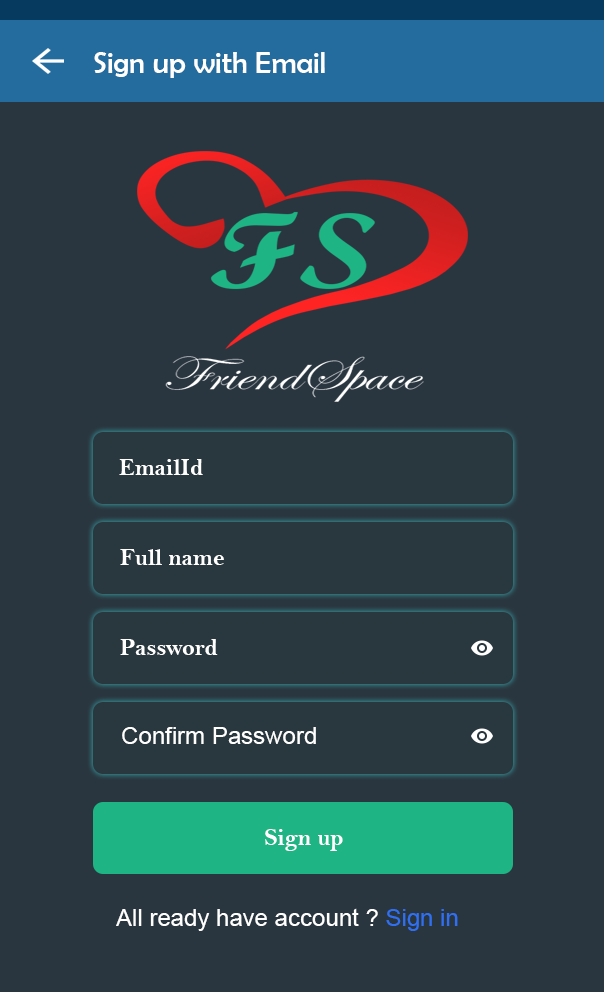
<style>
.page{position:relative;width:604px;height:992px;background:#29363f}
.page>*{position:absolute;margin:0}
.t1{font:30px "BerlinSansFB-Reg";color:#ffffff}
.t2{font:24px "BellMTBold";color:#ffffff}
.t3{font:24px "ArialMT";color:#ffffff}
.t4{font:24px "ArialMT";color:#306fef}
</style>
<div class="page">
<p class="t1" style="left:94px;top:52px;width:231px;height:26px">Sign up with Email</p>
<p class="t2" style="left:119px;top:459px;width:84px;height:16px">EmailId</p>
<p class="t2" style="left:120px;top:549px;width:104px;height:16px">Full name</p>
<p class="t2" style="left:120px;top:639px;width:98px;height:16px">Password</p>
<p class="t3" style="left:122px;top:727px;width:194px;height:17px">Confirm Password</p>
<p class="t2" style="left:265px;top:829px;width:78px;height:22px">Sign up</p>
<p class="t3" style="left:116px;top:908px;width:342px;height:23px">All ready have account ? <span class="t4">Sign in</span></p>
</div>
